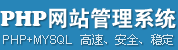
<style>
.page{position:relative;width:178px;height:50px;background:#2785b8}
.page>*{position:absolute;margin:0}
.t1{font:22px "FZDHTJW--GB1-0";letter-spacing:-0.02em;color:#ffffff}
.t2{font:22px "CooperBlack";letter-spacing:-0.02em;color:#ffffff}
.t3{font:12px "ArialMT";letter-spacing:-0.02em;color:#d4e7f1}
.t4{font:12px "SimSun";letter-spacing:-0.02em;color:#d4e7f1}
</style>
<div class="page">
<p class="t1" style="left:0px;top:8px;width:176px;height:21px"><span class="t2">PHP</span>网站管理系统</p>
<p class="t3" style="left:3px;top:34px;width:170px;height:11px">PHP+MYSQL   <span class="t4">高速、安全、稳定</span></p>
</div>
